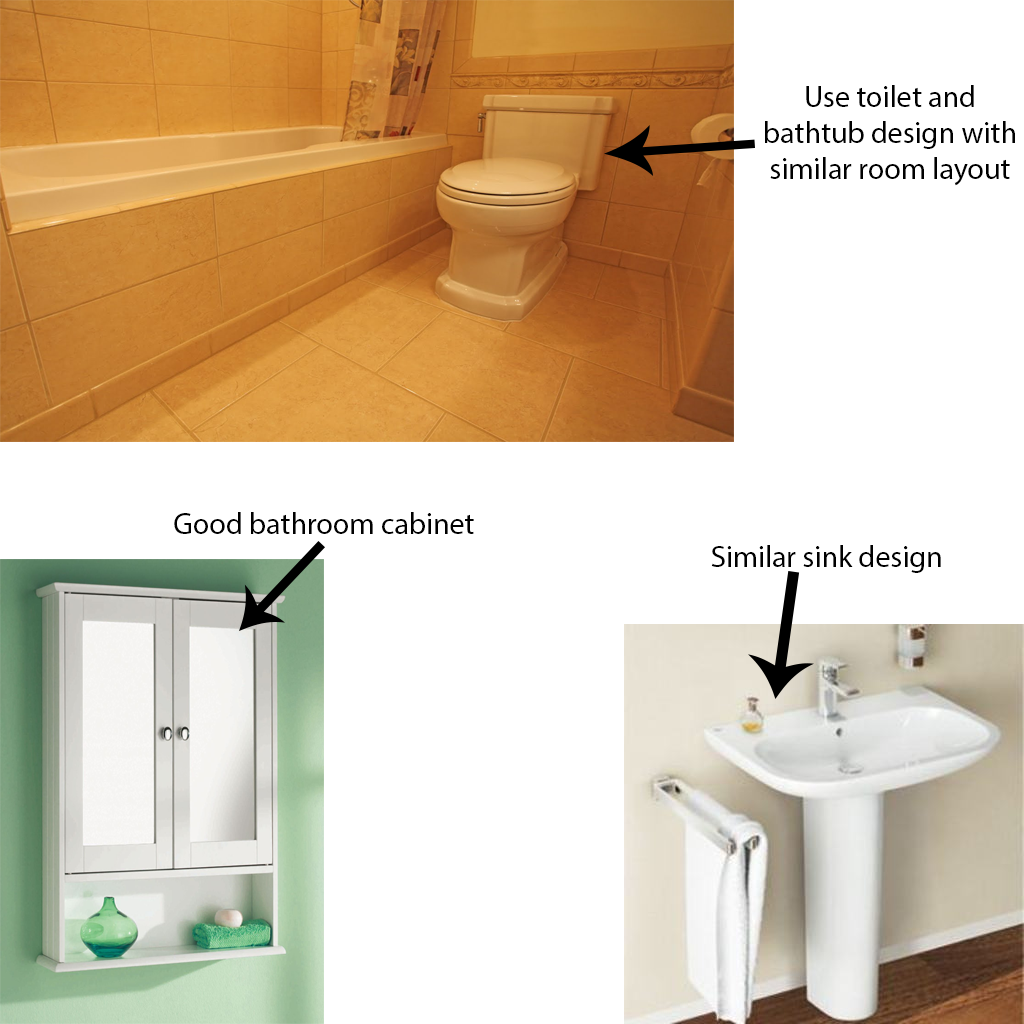
<style>
.page{position:relative;width:1024px;height:1024px;background:#ffffff}
.page>*{position:absolute;margin:0}
.t1{font:30px "MyriadPro-Regular";color:#000000}
</style>
<div class="page">
<p class="t1" style="left:765px;top:85px;width:250px;height:101px;text-align:center">Use toilet and bathtub design with similar room layout</p>
<p class="t1" style="left:174px;top:512px;width:300px;height:22px">Good bathroom cabinet</p>
<p class="t1" style="left:711px;top:545px;width:230px;height:28px">Similar sink design</p>
</div>
